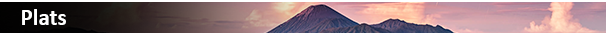
<style>
.page{position:relative;width:606px;height:35px}
.page>*{position:absolute;margin:0}
.t1{font:23px "Calibri-Bold";color:#ffffff}
</style>
<div class="page">
<p class="t1" style="left:22px;top:9px;width:44px;height:16px">Plats</p>
</div>
